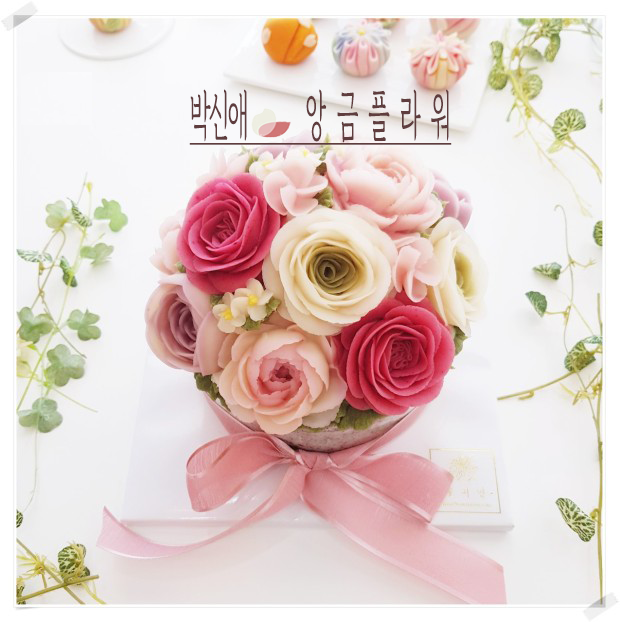
<style>
.page{position:relative;width:620px;height:622px}
.page>*{position:absolute;margin:0}
.t1{font:53.8px "GyeonggiBatangR";letter-spacing:-0.05em;color:#5f3d3e;text-decoration:underline;scale:0.43 1}
</style>
<div class="page">
<p class="t1" style="left:189px;top:89px;width:263px;height:56px">박신애          앙  금  플  라  워</p>
</div>
